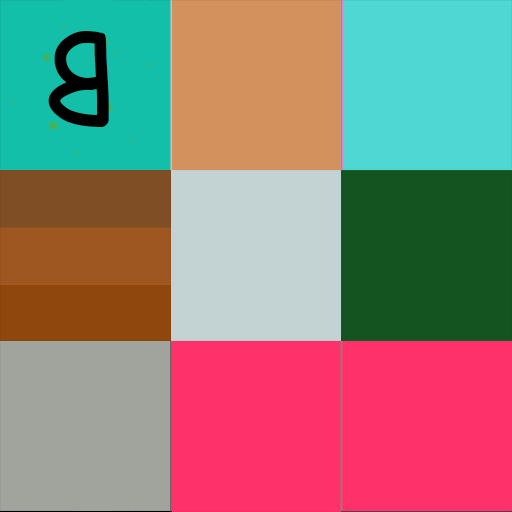
<style>
.page{position:relative;width:512px;height:512px;background:#ff316a}
.page>*{position:absolute;margin:0}
.t1{font:120.6px "ComicSansMS";color:#000000}
</style>
<div class="page">
<p class="t1" style="left:48px;top:31px;width:61px;height:96px;rotate:180deg">B</p>
</div>
